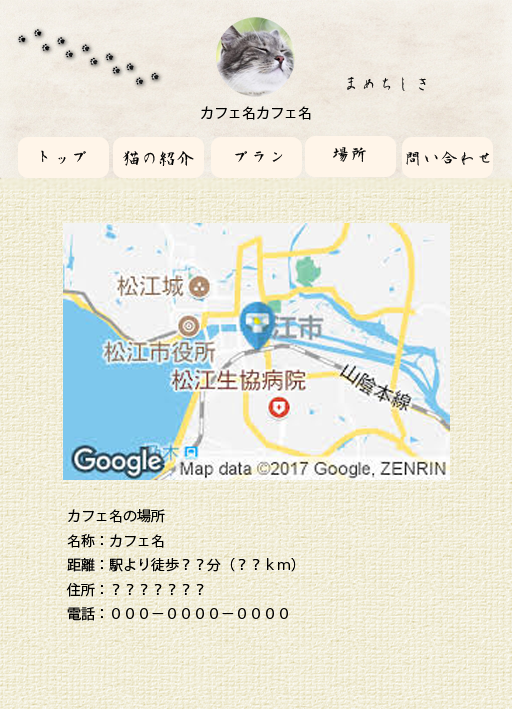
<style>
.page{position:relative;width:512px;height:709px}
.page>*{position:absolute;margin:0}
.t1{font:18px "AoyagiKouzanFontT";color:#000000}
.t2{font:14px "KozGoPr6N-Regular";color:#000000}
</style>
<div class="page">
<p class="t1" style="left:347px;top:76px;width:79px;height:15px">まめちしき</p>
<p class="t2" style="left:201px;top:106px;width:110px;height:14px">カフェ名カフェ名</p>
<p class="t1" style="left:41px;top:150px;width:45px;height:14px">トップ</p>
<p class="t1" style="left:123px;top:150px;width:71px;height:16px">猫の紹介</p>
<p class="t1" style="left:333px;top:147px;width:33px;height:15px">場所</p>
<p class="t1" style="left:235px;top:151px;width:48px;height:11px">プラン</p>
<p class="t1" style="left:406px;top:151px;width:84px;height:15px">問い合わせ</p>
<p class="t2" style="left:66px;top:509px;width:230px;height:112px">カフェ名の場所<br>名称：カフェ名<br>距離：駅より徒歩？？分（？？ｋｍ）<br>住所：？？？？？？？<br>電話：０００－００００－００００</p>
</div>
